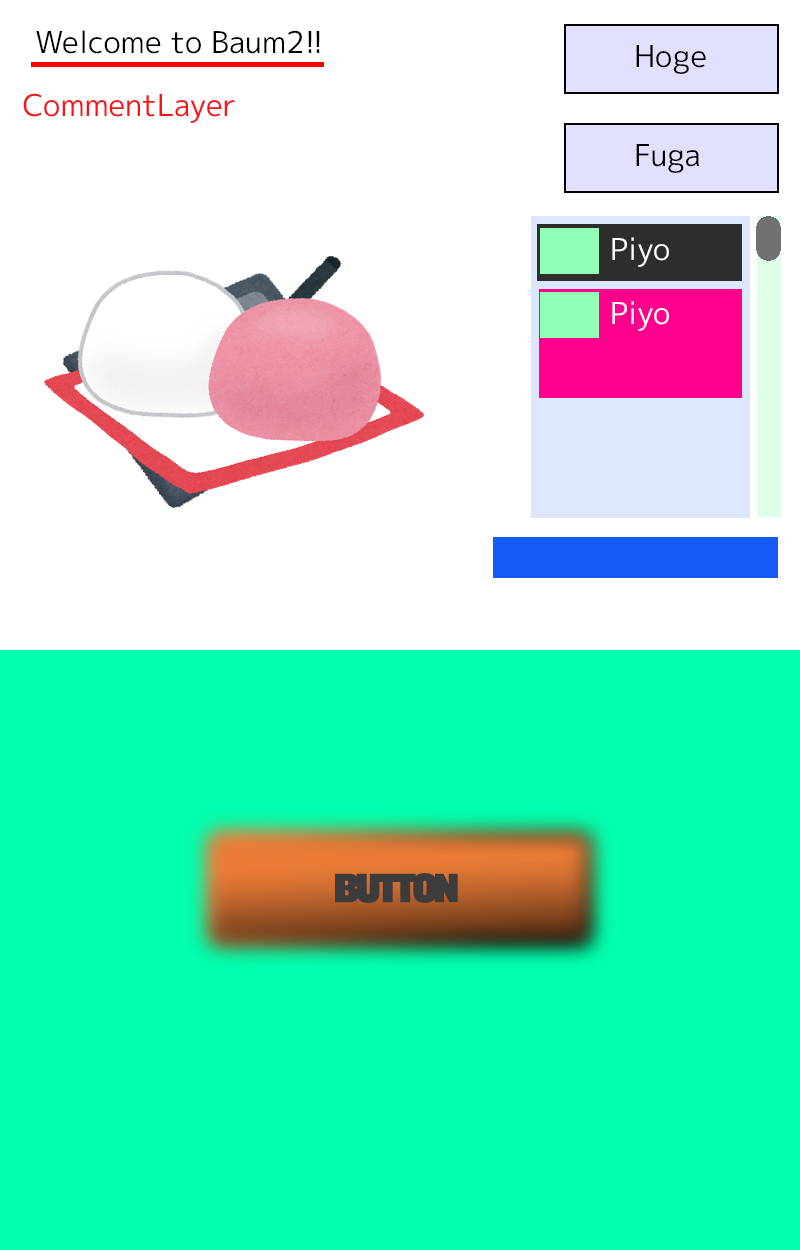
<style>
.page{position:relative;width:800px;height:1250px;background:#00ffae}
.page>*{position:absolute;margin:0}
.t1{font:30px "mplus-2p-regular";color:#000000}
.t2{font:30px "mplus-2p-regular";color:#ffffff}
.t3{font:40px "RailroadGothicATF-Heavy";letter-spacing:-0.1em;color:#3d3c3c}
</style>
<div class="page">
<p class="t1" style="left:36px;top:30px;width:284px;height:24px">Welcome to Baum2!!</p>
<p class="t1" style="left:636px;top:45px;width:70px;height:29px">Hoge</p>
<p class="t1" style="left:636px;top:144px;width:63px;height:29px">Fuga</p>
<p class="t2" style="left:612px;top:237px;width:57px;height:30px">Piyo</p>
<p class="t2" style="left:612px;top:301px;width:57px;height:30px">Piyo</p>
<p class="t3" style="left:335px;top:873px;width:123px;height:30px">button</p>
</div>
